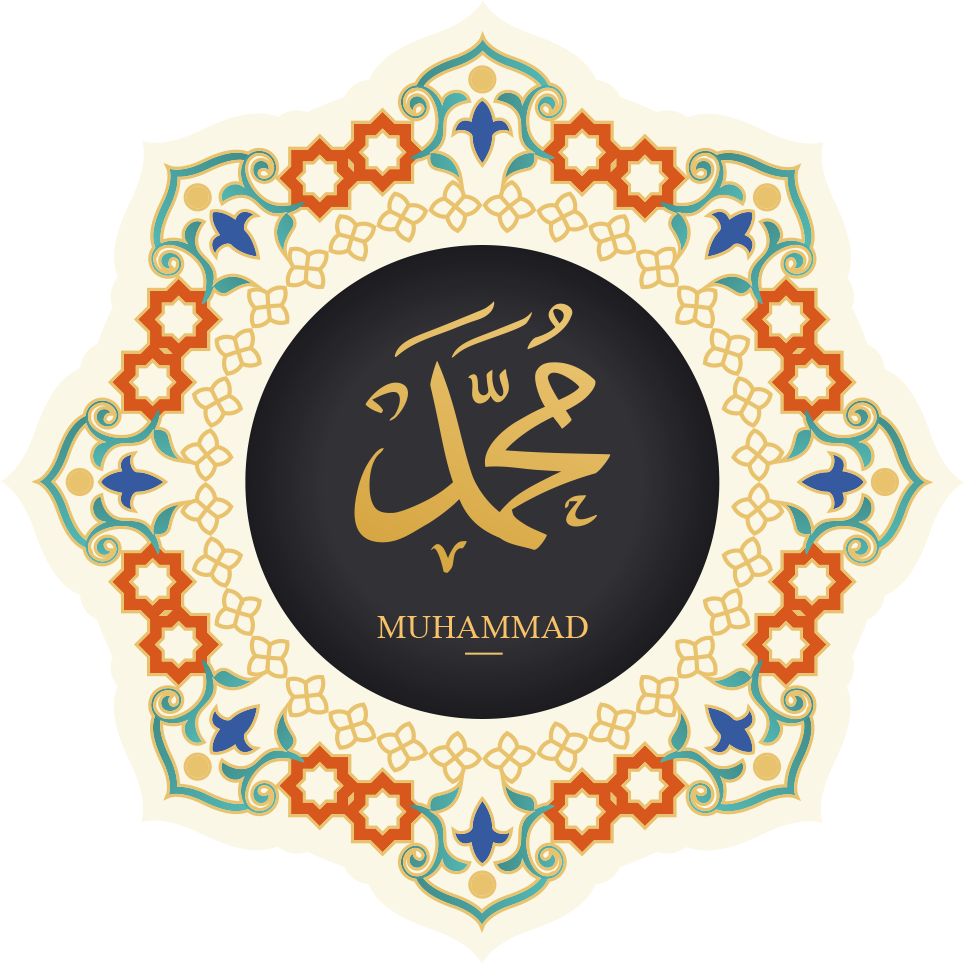
<style>
.page{position:relative;width:965px;height:964px;background:#ffffff}
.page>*{position:absolute;margin:0}
.t1{font:32.9px "Cinzel-Bold";letter-spacing:0.025em;color:#e9c26e}
</style>
<div class="page">
<p class="t1" style="left:377px;top:616px;width:211px;height:22px">MUHAMMAD</p>
</div>
